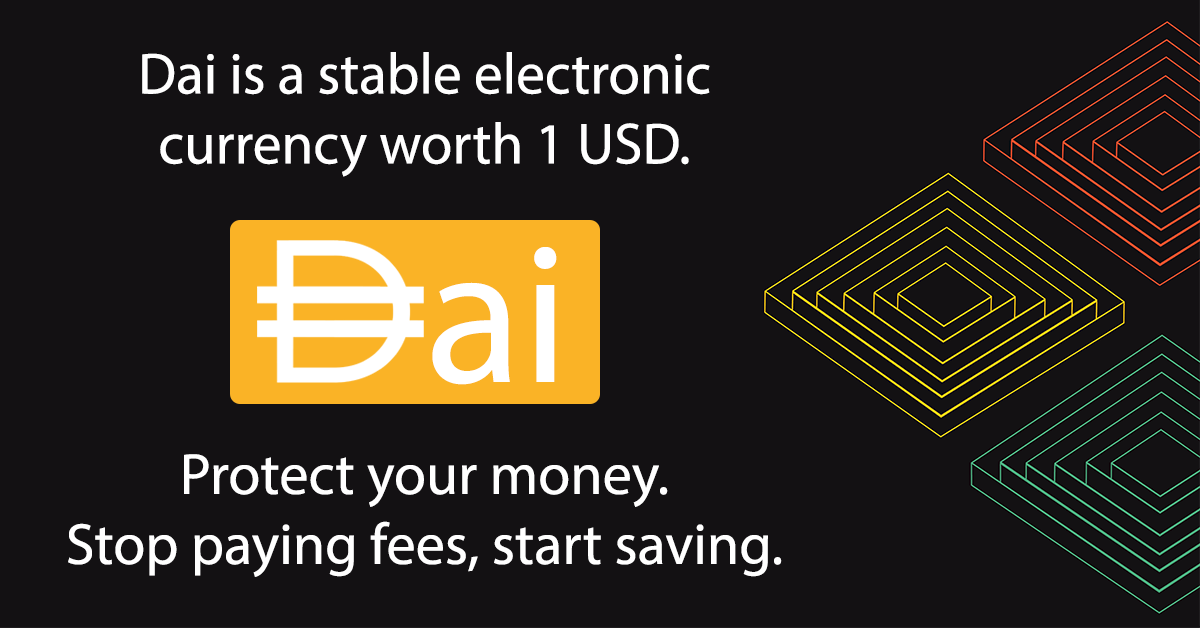
<style>
.page{position:relative;width:1200px;height:628px;background:#131113}
.page>*{position:absolute;margin:0}
.t1{font:58.3px "MyriadPro-Regular";color:#ffffff}
.t2{font:200px "MyriadPro-Regular";color:#ffffff}
</style>
<div class="page">
<p class="t1" style="left:142px;top:52px;width:568px;height:125px;text-align:center">Dai is a stable electronic currency worth 1 USD.</p>
<p class="t2" style="left:432px;top:247px;width:125px;height:138px">ai</p>
<p class="t1" style="left:68px;top:454px;width:714px;height:123px;text-align:center">Protect your money.<br>Stop paying fees, start saving.</p>
</div>
